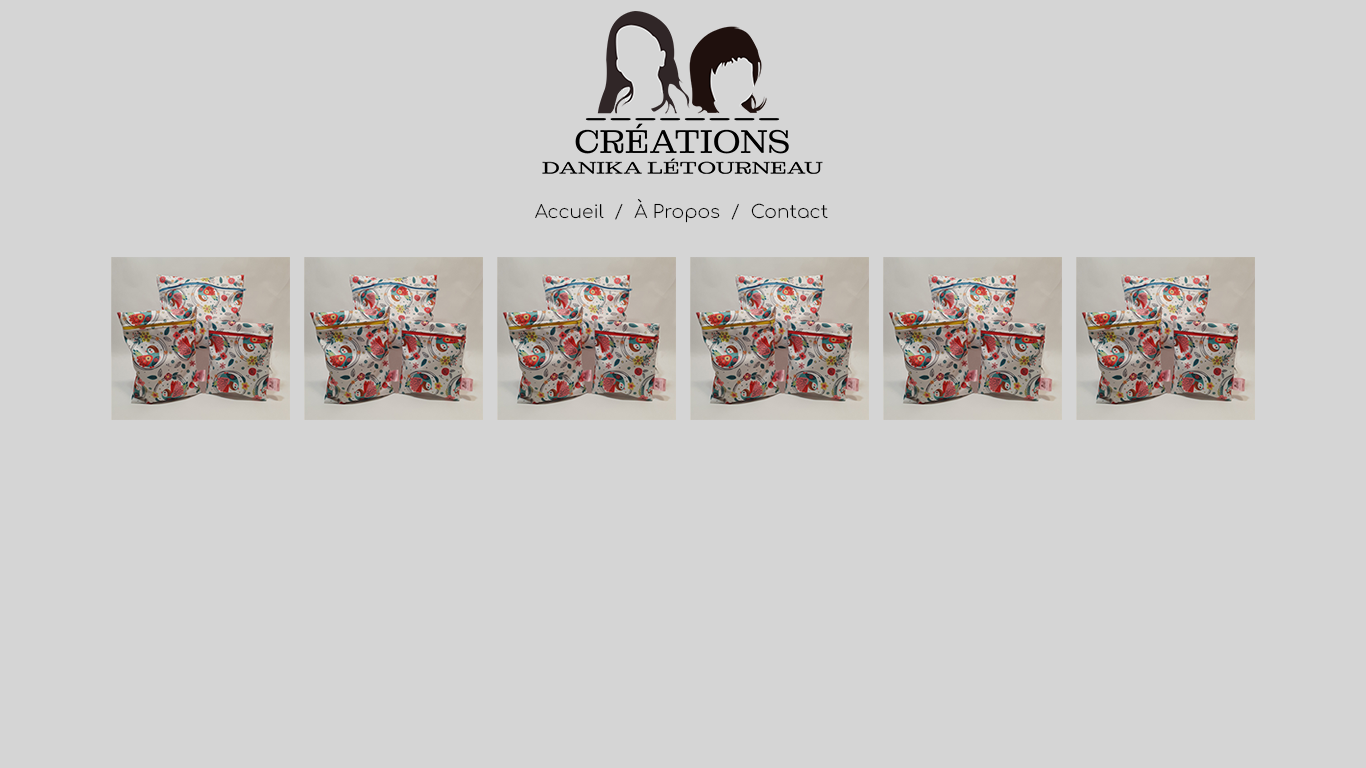
<style>
.page{position:relative;width:1366px;height:768px;background:#d5d5d5}
.page>*{position:absolute;margin:0}
.t1{font:18px "Comfortaa-Light";color:#000000;scale:1.04 1}
</style>
<div class="page">
<p class="t1" style="left:535px;top:199px;width:293px;height:24px">Accueil  /  À Propos  /  Contact</p>
</div>
